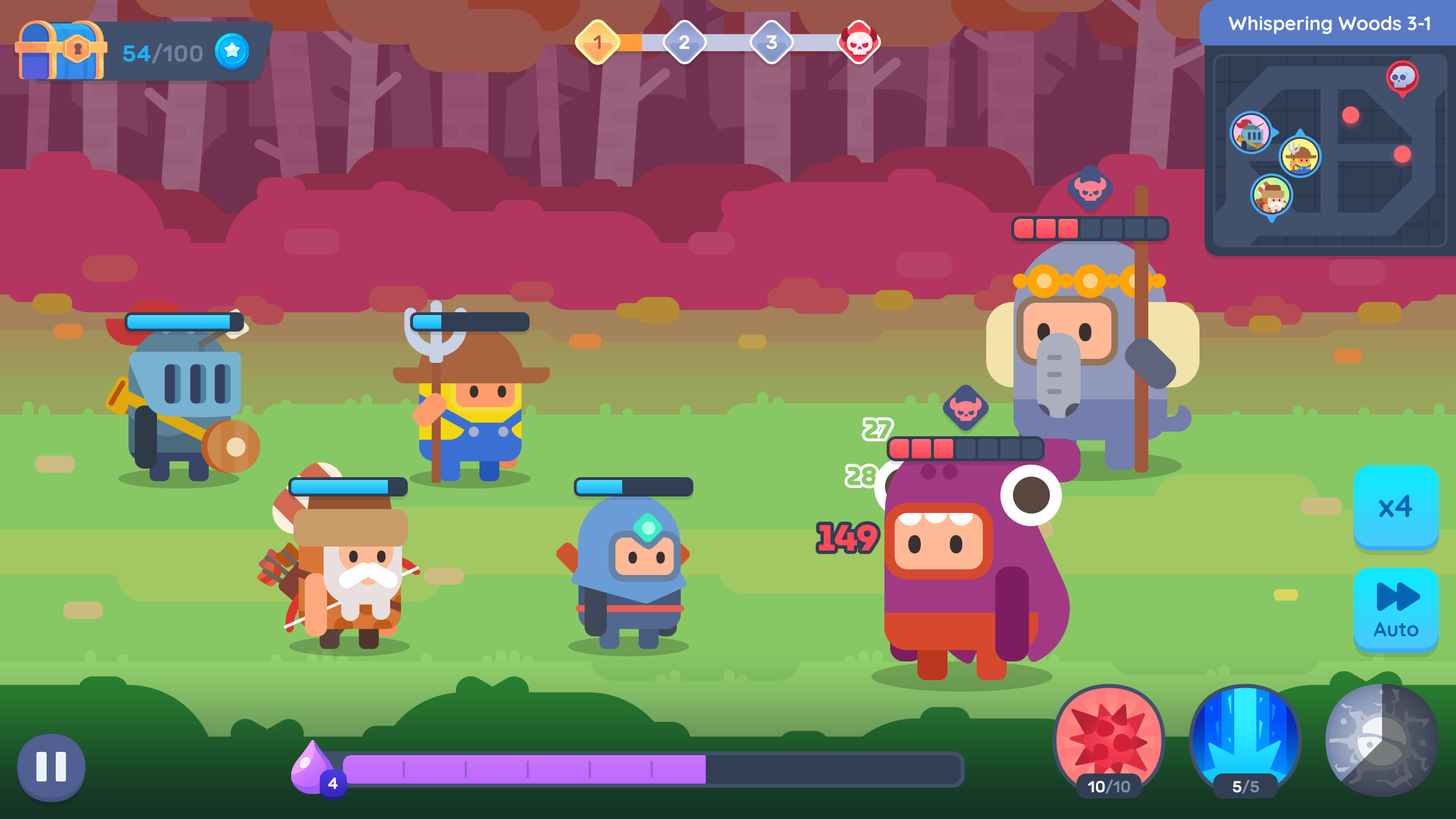
<style>
.page{position:relative;width:1456px;height:819px}
.page>*{position:absolute;margin:0}
.t1{font:19.3px "Quicksand-Bold";color:#ffffff}
.t2{font:19.3px "Rubik-Medium";letter-spacing:-0.025em;color:#c0553c}
.t3{font:19.3px "Rubik-Medium";letter-spacing:-0.025em;color:#ffffff}
.t4{font:22.7px "Rubik-Medium";color:#72829c}
.t5{font:22.7px "Rubik-Medium";color:#1cb0f6}
.t6{font:26.2px "MuseoModerno-ExtraBold";letter-spacing:-0.025em;color:#88c864}
.t7{font:31.8px "Quicksand-Bold";color:#0065b4}
.t8{font:36.4px "MuseoModerno-ExtraBold";letter-spacing:-0.025em;color:#fc4b5a}
.t9{font:20.5px "Quicksand-Bold";color:#0065b4}
.t10{font:15.9px "Rubik-Medium";color:#ffffff}
.t11{font:15.9px "Rubik-Medium";color:#8092a6;text-transform:uppercase}
.t12{font:15.9px "Rubik-Medium";color:#ffffff;text-transform:uppercase}
</style>
<div class="page">
<p class="t1" style="left:1228px;top:16px;width:202px;height:18px">Whispering Woods 3-1</p>
<p class="t2" style="left:593px;top:35px;width:8px;height:14px">1</p>
<p class="t3" style="left:679px;top:35px;width:10px;height:14px">2</p>
<p class="t3" style="left:766px;top:35px;width:11px;height:14px">3</p>
<p class="t4" style="left:123px;top:43px;width:79px;height:21px"><span class="t5">54</span>/100</p>
<p class="t6" style="left:864px;top:420px;width:28px;height:19px">27</p>
<p class="t6" style="left:847px;top:466px;width:30px;height:20px">28</p>
<p class="t7" style="left:1379px;top:494px;width:34px;height:23px">x4</p>
<p class="t8" style="left:819px;top:524px;width:59px;height:27px">149</p>
<p class="t9" style="left:1374px;top:622px;width:44px;height:15px">Auto</p>
<p class="t10" style="left:328px;top:777px;width:10px;height:12px">4</p>
<p class="t11" style="left:1088px;top:780px;width:42px;height:14px"><span class="t12">10</span>/10</p>
<p class="t11" style="left:1232px;top:780px;width:27px;height:14px"><span class="t12">5</span>/5</p>
</div>
